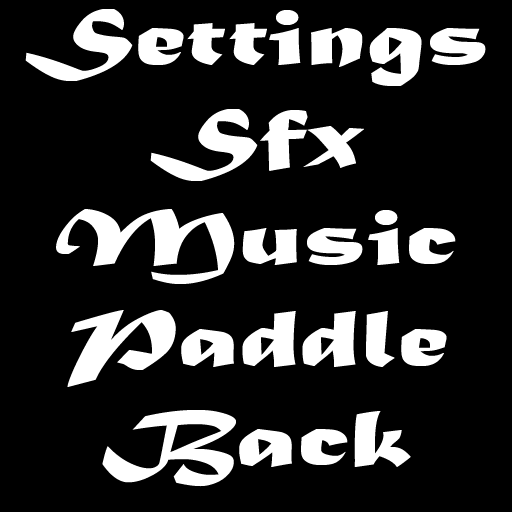
<style>
.page{position:relative;width:512px;height:512px;background:#000000}
.page>*{position:absolute;margin:0}
.t1{font:83.6px "MaturaMTScriptCapitals";color:#ffffff;scale:1.49 1}
</style>
<div class="page">
<p class="t1" style="left:25px;top:9px;width:461px;height:478px;text-align:center">Settings<br>Sfx<br>Music<br>Paddle<br>Back</p>
</div>
